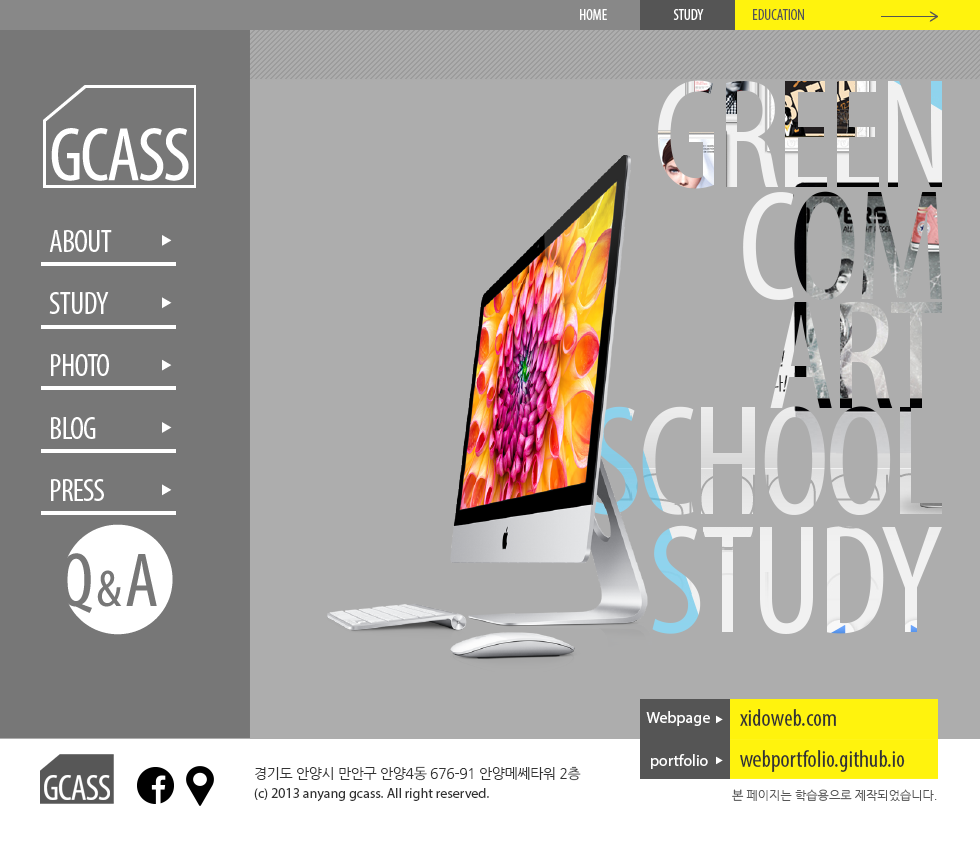
<style>
.page{position:relative;width:980px;height:850px;background:#adadad}
.page>*{position:absolute;margin:0}
.t1{font:15px "MyriadPro-Cond";color:#ffffff}
.t2{font:15px "MyriadPro-Cond";color:#555555}
.t3{font:31.5px "MyriadPro-Cond";letter-spacing:-0.03em;color:#ffffff}
.t4{font:16px "MyriadPro-Regular";color:#ffffff}
.t5{font:24px "MyriadPro-Cond";color:#333333}
.t6{font:14px "NanumGothic";letter-spacing:-0.025em;color:#333333}
.t7{font:14px "MyriadPro-Regular";color:#333333}
.t8{font:12px "NanumGothic";color:#575757}
</style>
<div class="page">
<p class="t1" style="left:580px;top:9px;width:27px;height:11px">HOME</p>
<p class="t1" style="left:673px;top:9px;width:31px;height:11px">STUDY</p>
<p class="t2" style="left:753px;top:9px;width:51px;height:11px">EDUCATION</p>
<p class="t3" style="left:49px;top:230px;width:63px;height:22px">ABOUT</p>
<p class="t3" style="left:49px;top:292px;width:60px;height:22px">STUDY</p>
<p class="t3" style="left:51px;top:354px;width:58px;height:22px">PHOTO</p>
<p class="t3" style="left:51px;top:417px;width:45px;height:22px">BLOG</p>
<p class="t3" style="left:51px;top:479px;width:53px;height:22px">PRESS</p>
<p class="t4" style="left:646px;top:711px;width:64px;height:15px">Webpage</p>
<p class="t5" style="left:740px;top:709px;width:96px;height:17px">xidoweb.com</p>
<p class="t5" style="left:740px;top:750px;width:165px;height:22px">webportfolio.github.io</p>
<p class="t4" style="left:651px;top:754px;width:57px;height:15px">portfolio</p>
<p class="t6" style="left:255px;top:766px;width:326px;height:15px">경기도 안양시 만안구 안양4동 676-91 안양메쎄타워 2층</p>
<p class="t7" style="left:254px;top:788px;width:235px;height:14px">(c) 2013 anyang gcass. All right reserved.</p>
<p class="t8" style="left:732px;top:789px;width:205px;height:12px">본 페이지는 학습용으로 제작되었습니다.</p>
</div>
